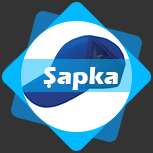
<style>
.page{position:relative;width:153px;height:153px;background:#333333}
.page>*{position:absolute;margin:0}
.t1{font:25px "ErasITC-Bold";color:#ffffff}
</style>
<div class="page">
<p class="t1" style="left:43px;top:67px;width:75px;height:23px">Sapka</p>
</div>
